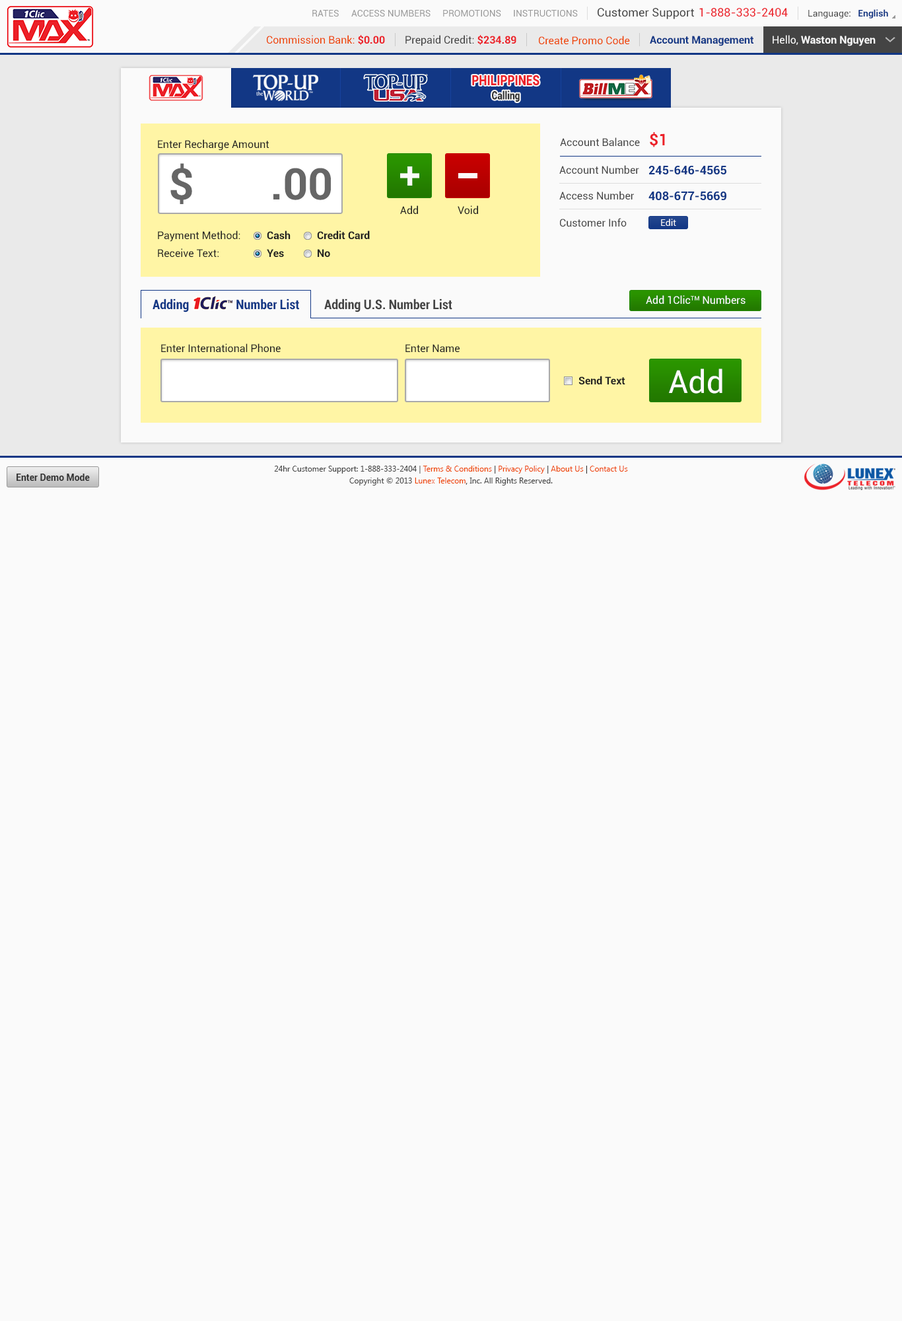
<style>
.page{position:relative;width:902px;height:1321px;background:#fafafa}
.page>*{position:absolute;margin:0}
.t1{font:9.2px "Roboto-Regular";color:#999999}
.t2{font:11.6px "Roboto-Regular";color:#444444}
.t3{font:11.6px "Roboto-Regular";color:#ec2029}
.t4{font:9.2px "Roboto-Regular";color:#444444}
.t5{font:9.2px "Roboto-Bold";color:#123785}
.t6{font:10.6px "Roboto-Regular";color:#ee4400}
.t7{font:10.6px "Roboto-Bold";color:#ec2028}
.t8{font:10.6px "Roboto-Regular";color:#444444}
.t9{font:10.6px "Roboto-Bold";color:#123785}
.t10{font:10.6px "Roboto-Bold";color:#fafafa}
.t11{font:10.6px "Roboto-Regular";color:#fafafa}
.t12{font:14.1px "Roboto-Black";color:#ec2028;scale:0.81 1}
.t13{font:11.3px "Roboto-Black";color:#333333;scale:0.81 1}
.t14{font:15.9px "Roboto-Bold";color:#ec2028}
.t15{font:10.6px "Roboto-Regular";color:#222222}
.t16{font:43.6px "Roboto-Bold";color:#666666}
.t17{font:11.9px "Roboto-Bold";color:#123785}
.t18{font:9.2px "Roboto-Regular";color:#fafafa}
.t19{font:10.6px "Roboto-Bold";color:#222222}
.t20{font:13.2px "Roboto-BoldCondensed";color:#123785}
.t21{font:13.2px "Roboto-BoldCondensed";color:#444444}
.t22{font:31.7px "Roboto-Regular";color:#fafafa}
.t23{font:9.2px "Roboto-Bold";color:#333333}
.t24{font:7.9px/11.9px "SegoeUI";color:#444444}
.t25{font:7.9px/11.9px "SegoeUI";color:#ee4400}
.t26{font:7.9px/11.9px "SegoeUI";color:#333333}
</style>
<div class="page">
<p class="t1" style="left:312px;top:10px;width:27px;height:7px">RATES</p>
<p class="t1" style="left:351px;top:10px;width:80px;height:7px">ACCESS NUMBERS</p>
<p class="t1" style="left:443px;top:10px;width:58px;height:7px">PROMOTIONS</p>
<p class="t1" style="left:514px;top:10px;width:64px;height:7px">INSTRUCTIONS</p>
<p class="t2" style="left:598px;top:8px;width:96px;height:11px">Customer Support</p>
<p class="t3" style="left:700px;top:8px;width:88px;height:9px">1-888-333-2404</p>
<p class="t4" style="left:809px;top:9px;width:80px;height:9px">Language:   <span class="t5">English</span></p>
<p class="t6" style="left:267px;top:35px;width:118px;height:10px">Commission Bank: <span class="t7">$0.00</span></p>
<p class="t8" style="left:406px;top:35px;width:111px;height:11px">Prepaid Credit: <span class="t7">$234.89</span></p>
<p class="t6" style="left:539px;top:36px;width:91px;height:9px">Create Promo Code</p>
<p class="t9" style="left:650px;top:36px;width:104px;height:10px">Account Management</p>
<p class="t10" style="left:773px;top:35px;width:103px;height:11px"><span class="t11">Hello, </span>Waston Nguyen</p>
<p class="t12" style="left:472px;top:75px;width:68px;height:11px">PHILIPPINES</p>
<p class="t13" style="left:492px;top:91px;width:28px;height:11px">Calling</p>
<p class="t8" style="left:560px;top:137px;width:80px;height:10px">Account Balance</p>
<p class="t14" style="left:650px;top:132px;width:15px;height:15px">$1</p>
<p class="t15" style="left:158px;top:139px;width:112px;height:12px">Enter Recharge Amount</p>
<p class="t16" style="left:170px;top:163px;width:161px;height:41px">$       .00</p>
<p class="t8" style="left:560px;top:165px;width:80px;height:9px">Account Number</p>
<p class="t17" style="left:649px;top:166px;width:78px;height:8px">245-646-4565</p>
<p class="t8" style="left:560px;top:191px;width:74px;height:9px">Access Number</p>
<p class="t17" style="left:649px;top:192px;width:78px;height:8px">408-677-5669</p>
<p class="t15" style="left:400px;top:205px;width:18px;height:9px">Add</p>
<p class="t15" style="left:458px;top:205px;width:20px;height:9px">Void</p>
<p class="t8" style="left:560px;top:218px;width:67px;height:9px">Customer Info</p>
<p class="t18" style="left:661px;top:219px;width:16px;height:7px">Edit</p>
<p class="t15" style="left:158px;top:231px;width:82px;height:11px">Payment Method:</p>
<p class="t19" style="left:267px;top:231px;width:24px;height:9px">Cash</p>
<p class="t19" style="left:317px;top:231px;width:53px;height:9px">Credit Card</p>
<p class="t15" style="left:158px;top:248px;width:61px;height:9px">Receive Text:</p>
<p class="t19" style="left:267px;top:249px;width:17px;height:8px">Yes</p>
<p class="t19" style="left:318px;top:249px;width:12px;height:8px">No</p>
<p class="t20" style="left:153px;top:299px;width:146px;height:13px">Adding                Number List</p>
<p class="t21" style="left:324px;top:299px;width:129px;height:13px">Adding U.S. Number List</p>
<p class="t11" style="left:646px;top:295px;width:100px;height:10px">Add 1ClicTM Numbers</p>
<p class="t15" style="left:161px;top:344px;width:120px;height:9px">Enter International Phone</p>
<p class="t15" style="left:406px;top:344px;width:54px;height:9px">Enter Name</p>
<p class="t19" style="left:579px;top:376px;width:47px;height:9px">Send Text</p>
<p class="t22" style="left:669px;top:369px;width:54px;height:25px">Add</p>
<p class="t23" style="left:17px;top:474px;width:73px;height:7px">Enter Demo Mode</p>
<p class="t24" style="left:274px;top:466px;width:354px;height:20px;text-align:center">24hr Customer Support: 1-888-333-2404 | <span class="t25">Terms &amp; Conditions</span><span class="t26"> | </span><span class="t25">Privacy Policy</span><span class="t26"> | </span><span class="t25">About Us</span><span class="t26"> | </span><span class="t25">Contact Us<br></span>Copyright © 2013 <span class="t25">Lunex Telecom</span><span class="t26">,</span> Inc. All Rights Reserved.</p>
</div>
